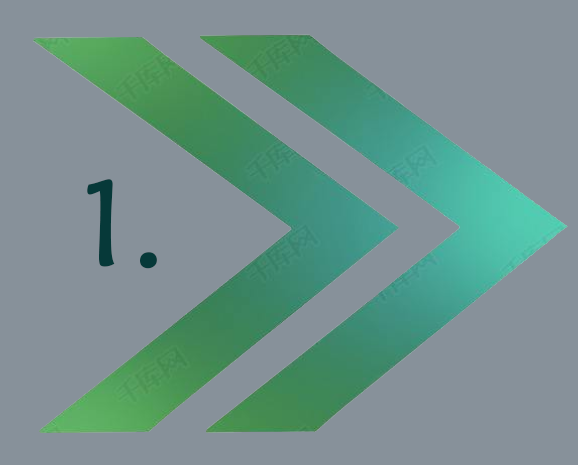
<style>
.page{position:relative;width:578px;height:465px;background:#87919a}
.page>*{position:absolute;margin:0}
.t1{font:125px "STXinwei";color:#063939}
</style>
<div class="page">
<p class="t1" style="left:87px;top:179px;width:70px;height:90px">1.</p>
</div>
